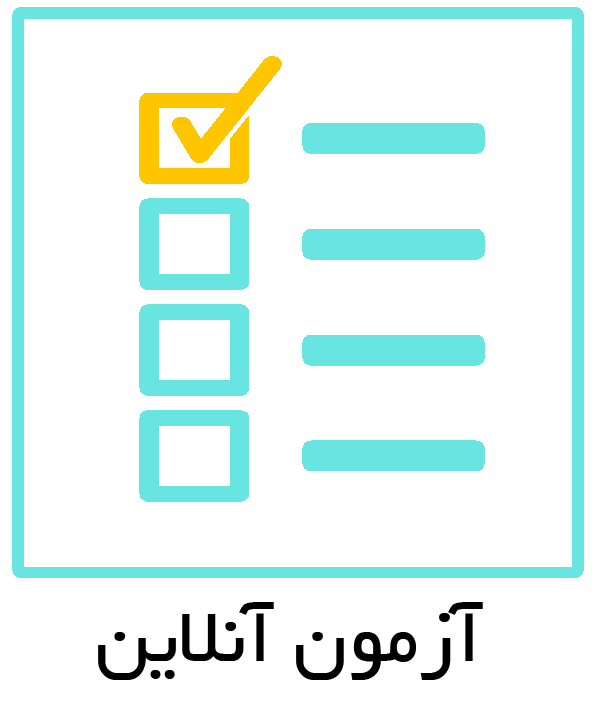
<style>
.page{position:relative;width:595px;height:709px;background:#ffffff}
.page>*{position:absolute;margin:0}
.t1{font:84px "BYekan";color:#000000}
</style>
<div class="page">
<p class="t1" style="left:98px;top:602px;width:385px;height:78px">آزمون آنلاین</p>
</div>
